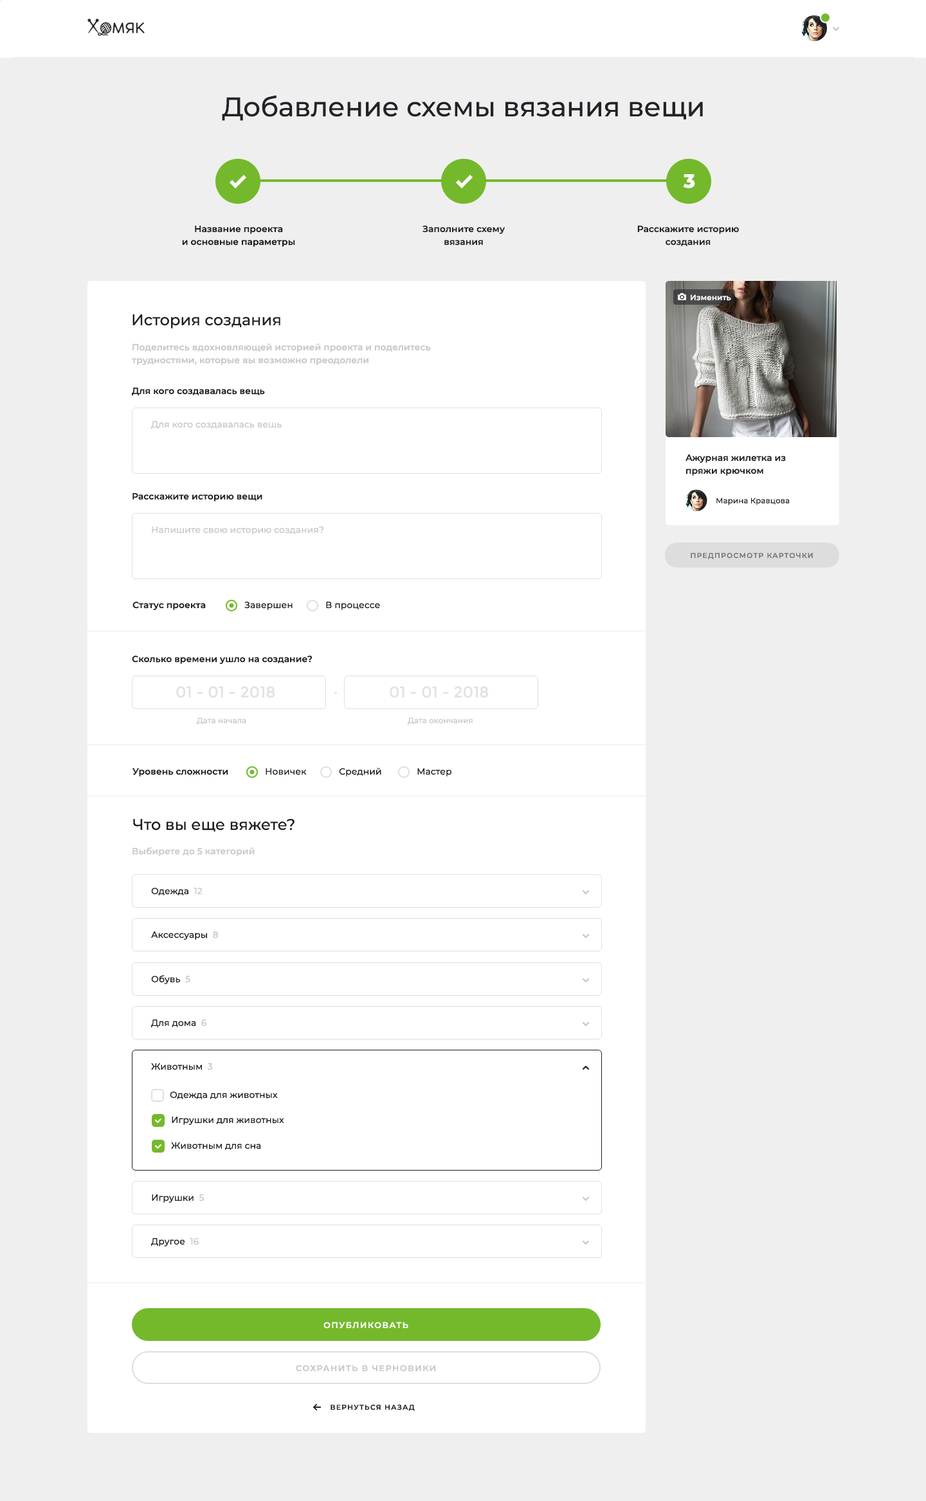
<style>
.page{position:relative;width:926px;height:1501px;background:#ffffff}
.page>*{position:absolute;margin:0}
.t1{font:27px "Montserrat-Medium";color:#222328}
.t2{font:19.3px "Montserrat-ExtraBold";color:#ffffff}
.t3{font:9px/12.9px "Montserrat-SemiBold";color:#1c1e23}
.t4{font:9px/12.9px "Montserrat-SemiBold";color:#222328}
.t5{font:7.7px "Montserrat-SemiBold";color:#ffffff}
.t6{font:15.4px "Montserrat-Medium";color:#222328}
.t7{font:9px/12.9px "Montserrat-SemiBold";color:#c8c8c8}
.t8{font:9px "Montserrat-SemiBold";color:#1c1e23}
.t9{font:9px "Montserrat-Medium";color:#c8c8c8}
.t10{font:7.7px "Montserrat-Medium";color:#222328}
.t11{font:7.1px "Montserrat-SemiBold";letter-spacing:0.1em;color:#787878;text-transform:uppercase}
.t12{font:9px "Montserrat-Medium";color:#1c1e23}
.t13{font:15.4px "Montserrat-Regular";color:#e3e3e3}
.t14{font:7.7px "Montserrat-Medium";color:#c8c8c8}
.t15{font:15.4px "Montserrat-Medium";color:#1c1e23}
.t16{font:9px "Montserrat-SemiBold";color:#c8c8c8}
.t17{font:8.4px "Montserrat-SemiBold";letter-spacing:0.1em;color:#ffffff;text-transform:uppercase}
.t18{font:8.4px "Montserrat-SemiBold";letter-spacing:0.1em;color:#c8c8c8;text-transform:uppercase}
.t19{font:7.1px "Montserrat-SemiBold";letter-spacing:0.1em;color:#1c1e23;text-transform:uppercase}
</style>
<div class="page">
<p class="t1" style="left:222px;top:95px;width:481px;height:26px">Добавление схемы вязания вещи</p>
<p class="t2" style="left:683px;top:174px;width:12px;height:14px">3</p>
<p class="t3" style="left:182px;top:226px;width:113px;height:21px;text-align:center">Название проекта<br>и основные параметры</p>
<p class="t4" style="left:422px;top:226px;width:83px;height:20px;text-align:center">Заполните схему<br>вязания</p>
<p class="t4" style="left:637px;top:226px;width:102px;height:20px;text-align:center">Расскажите историю<br>создания</p>
<p class="t5" style="left:690px;top:294px;width:41px;height:7px">Изменить</p>
<p class="t6" style="left:132px;top:314px;width:148px;height:14px">История создания</p>
<p class="t7" style="left:132px;top:343px;width:299px;height:22px">Поделитесь вдохновляющей историей проекта и поделитесь <br>трудностями, которые вы возможно преодолели</p>
<p class="t8" style="left:132px;top:388px;width:133px;height:8px">Для кого создавалась вещь</p>
<p class="t9" style="left:151px;top:421px;width:131px;height:8px">Для кого создавалась вешь</p>
<p class="t4" style="left:685px;top:455px;width:101px;height:21px">Ажурная жилетка из <br>пряжи крючком</p>
<p class="t8" style="left:132px;top:493px;width:130px;height:8px">Расскажите историю вещи</p>
<p class="t10" style="left:716px;top:498px;width:73px;height:7px">Марина Кравцова</p>
<p class="t9" style="left:152px;top:526px;width:172px;height:9px">Напишите свою историю создания?</p>
<p class="t11" style="left:690px;top:553px;width:123px;height:6px">предпросмотр карточки</p>
<p class="t8" style="left:132px;top:602px;width:74px;height:8px">Статус проекта</p>
<p class="t12" style="left:244px;top:602px;width:48px;height:8px">Завершен</p>
<p class="t12" style="left:326px;top:602px;width:54px;height:8px">В процессе</p>
<p class="t8" style="left:132px;top:656px;width:180px;height:8px">Сколько времени ушло на создание?</p>
<p class="t13" style="left:176px;top:686px;width:99px;height:12px">01 - 01 - 2018</p>
<p class="t13" style="left:390px;top:686px;width:99px;height:12px">01 - 01 - 2018</p>
<p class="t9" style="left:334px;top:692px;width:3px;height:2px">-</p>
<p class="t14" style="left:197px;top:717px;width:49px;height:7px">Дата начала</p>
<p class="t14" style="left:408px;top:717px;width:65px;height:7px">Дата окончания</p>
<p class="t8" style="left:132px;top:768px;width:96px;height:9px">Уровень сложности</p>
<p class="t12" style="left:266px;top:768px;width:41px;height:7px">Новичек</p>
<p class="t12" style="left:339px;top:768px;width:42px;height:9px">Средний</p>
<p class="t12" style="left:417px;top:768px;width:34px;height:9px">Мастер</p>
<p class="t15" style="left:133px;top:819px;width:161px;height:13px">Что вы еще вяжете?</p>
<p class="t16" style="left:132px;top:847px;width:123px;height:9px;opacity:0.94">Выбирете до 5 категорий</p>
<p class="t12" style="left:151px;top:888px;width:52px;height:8px">Одежда  <span class="t9">12</span></p>
<p class="t12" style="left:151px;top:932px;width:68px;height:8px">Аксессуары  <span class="t9">8</span></p>
<p class="t12" style="left:151px;top:975px;width:39px;height:9px">Обувь  <span class="t9">5</span></p>
<p class="t12" style="left:151px;top:1020px;width:56px;height:8px">Для дома  <span class="t9">6</span></p>
<p class="t12" style="left:151px;top:1063px;width:62px;height:7px">Животным  <span class="t9">3</span></p>
<p class="t12" style="left:170px;top:1092px;width:108px;height:7px">Одежда для животных</p>
<p class="t12" style="left:172px;top:1117px;width:112px;height:8px">Игрушки для животных</p>
<p class="t12" style="left:171px;top:1142px;width:90px;height:8px">Животным для сна</p>
<p class="t12" style="left:152px;top:1194px;width:52px;height:9px">Игрушки  <span class="t9">5</span></p>
<p class="t12" style="left:151px;top:1238px;width:48px;height:8px">Другое  <span class="t9">16</span></p>
<p class="t17" style="left:323px;top:1322px;width:85px;height:7px">опубликовать</p>
<p class="t18" style="left:296px;top:1365px;width:139px;height:7px">сохранить в черновики</p>
<p class="t19" style="left:330px;top:1405px;width:85px;height:6px">вернуться назад</p>
</div>
